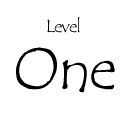
<style>
.page{position:relative;width:128px;height:128px;background:#ffffff}
.page>*{position:absolute;margin:0}
.t1{font:18px "TempusSansITC";letter-spacing:-0.04em;color:#000000}
.t2{font:60px "TempusSansITC";letter-spacing:-0.04em;color:#000000}
</style>
<div class="page">
<p class="t1" style="left:47px;top:17px;width:33px;height:16px">Level</p>
<p class="t2" style="left:16px;top:47px;width:99px;height:46px">One</p>
</div>
